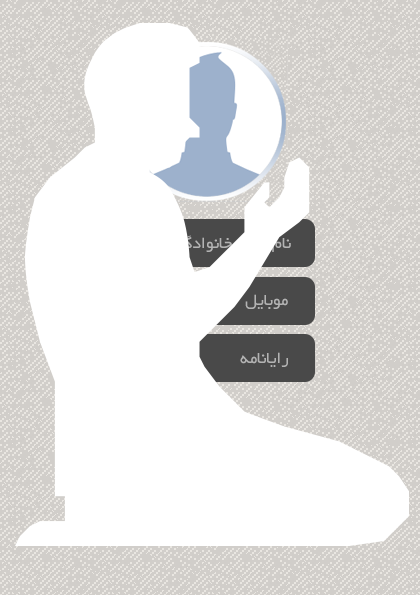
<style>
.page{position:relative;width:420px;height:595px;background:#ffffff}
.page>*{position:absolute;margin:0}
.t1{font:18px "BYekan";color:#b3b3b3}
</style>
<div class="page">
<p class="t1" style="left:245px;top:294px;width:43px;height:15px">موبایل</p>
<p class="t1" style="left:240px;top:352px;width:48px;height:15px">رایانامه</p>
</div>
